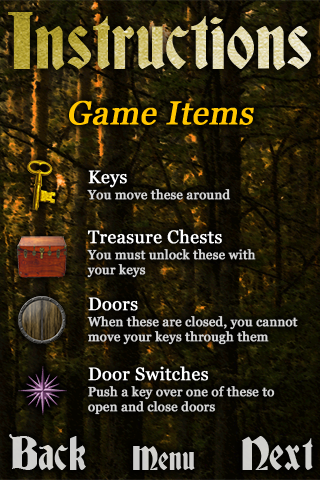
<style>
.page{position:relative;width:320px;height:480px}
.page>*{position:absolute;margin:0}
.t1{font:73px "Deutsch-Gothic"}
.t2{font:33px "Georgia";color:#ffc600;font-weight:bold;font-style:italic}
.t3{font:13px "Georgia";color:#d7d7d7;font-weight:bold}
.t4{font:18px "Georgia";color:#ffffff;font-weight:bold}
.t5{font:43px "Deutsch-Gothic";color:#cfcfcc}
.t6{font:31px "Deutsch-Gothic";color:#cfcfcc}
</style>
<div class="page">
<p class="t1" style="left:8px;top:12px;width:304px;height:58px">Instructions</p>
<p class="t2" style="left:69px;top:100px;width:185px;height:25px">Game Items</p>
<p class="t3" style="left:87px;top:170px;width:144px;height:30px"><span class="t4">Keys<br></span>You move these around</p>
<p class="t3" style="left:87px;top:229px;width:169px;height:49px"><span class="t4">Treasure Chests<br></span>You must unlock these with <br>your keys</p>
<p class="t3" style="left:87px;top:297px;width:211px;height:48px"><span class="t4">Doors<br></span>When these are closed, you cannot<br>move your keys through them</p>
<p class="t3" style="left:88px;top:366px;width:187px;height:49px"><span class="t4">Door Switches<br></span>Push a key over one of these to<br>open and close doors</p>
<p class="t5" style="left:9px;top:434px;width:304px;height:36px">Back  <span class="t6">Menu</span>  Next</p>
</div>
